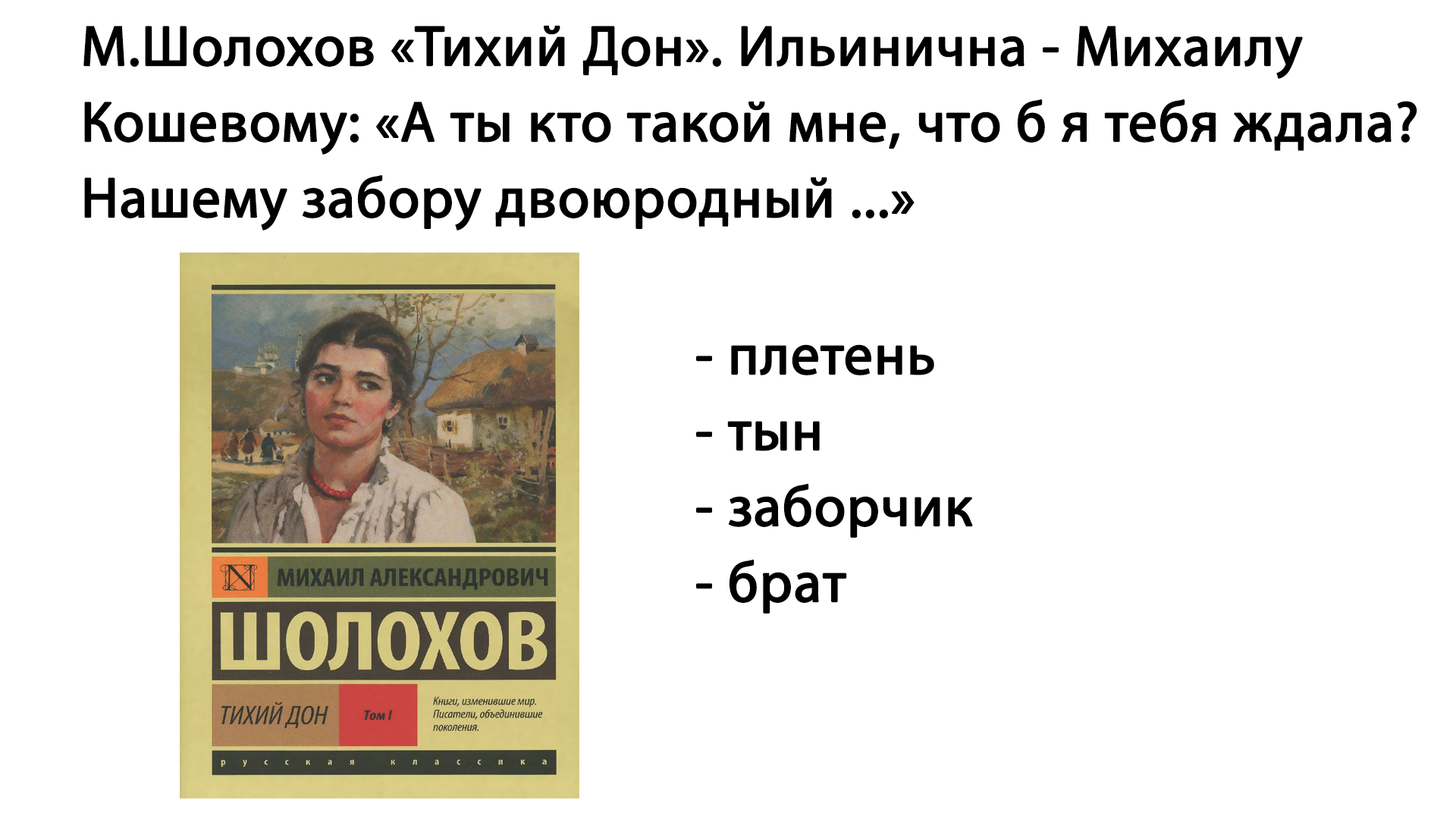
<style>
.page{position:relative;width:1456px;height:819px;background:#ffffff}
.page>*{position:absolute;margin:0}
.t1{font:56.9px/75.8px "MyriadPro-Regular";color:#000000;font-weight:bold}
</style>
<div class="page">
<p class="t1" style="left:83px;top:25px;width:1334px;height:206px">М.Шолохов «Тихий Дон». Ильинична - Михаилу <br>Кошевому: «А ты кто такой мне, что б я тебя ждала?<br>Нашему забору двоюродный ...»</p>
<p class="t1" style="left:696px;top:344px;width:277px;height:269px">- плетень<br>- тын<br>- заборчик<br>- брат</p>
</div>
